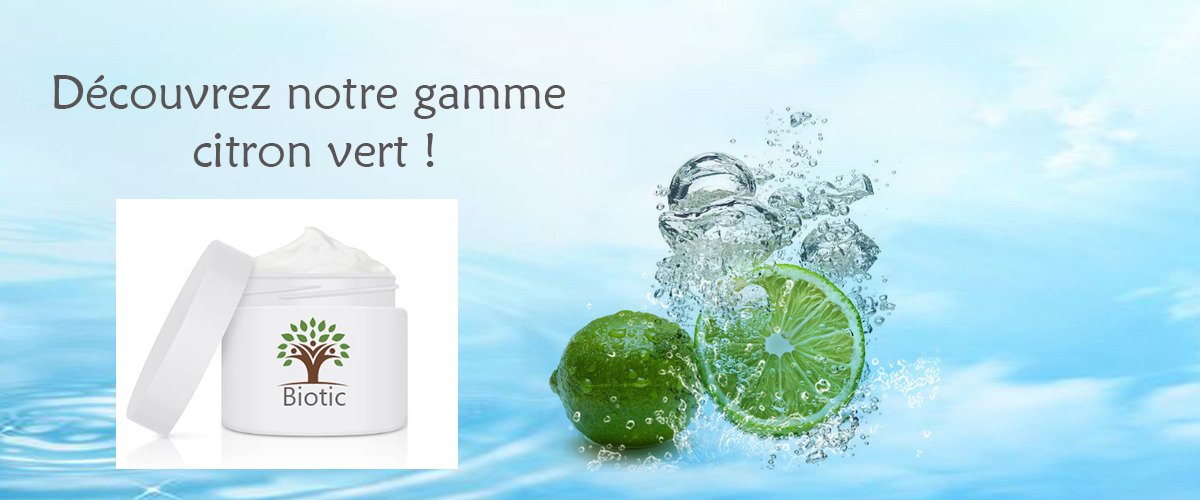
<style>
.page{position:relative;width:1200px;height:500px}
.page>*{position:absolute;margin:0}
.t1{font:48px "MaiandraGD-Regular";color:#5a5555}
</style>
<div class="page">
<p class="t1" style="left:53px;top:75px;width:512px;height:92px;text-align:center">Découvrez notre gamme <br>citron vert !</p>
</div>
